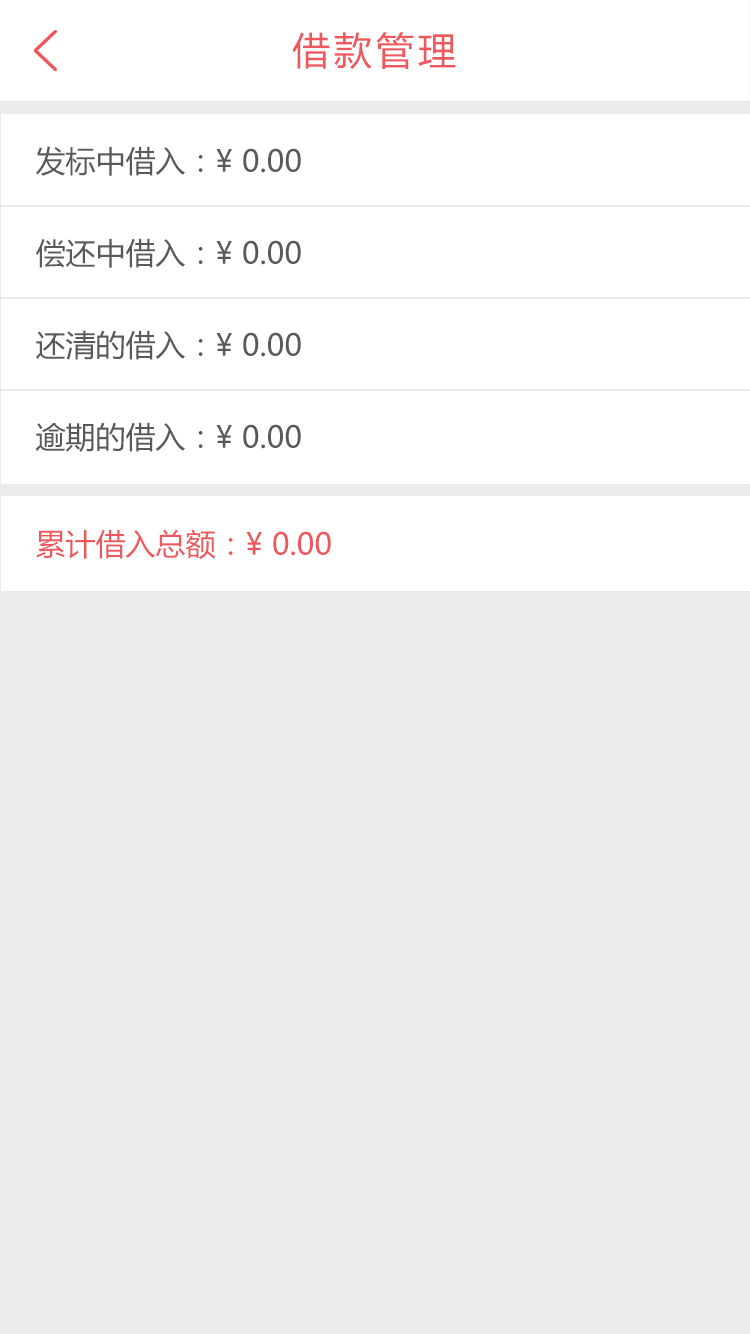
<style>
.page{position:relative;width:750px;height:1334px;background:#ebebeb}
.page>*{position:absolute;margin:0}
.t1{font:38px "MicrosoftYaHei";letter-spacing:0.1em;color:#ee575b}
.t2{font:30px "MicrosoftYaHei";color:#595959}
.t3{font:30px "MicrosoftYaHei";color:#ee575b}
</style>
<div class="page">
<p class="t1" style="left:292px;top:32px;width:164px;height:37px">借款管理</p>
<p class="t2" style="left:36px;top:146px;width:265px;height:30px">发标中借入：¥ 0.00</p>
<p class="t2" style="left:36px;top:238px;width:265px;height:30px">偿还中借入：¥ 0.00</p>
<p class="t2" style="left:36px;top:330px;width:265px;height:30px">还清的借入：¥ 0.00</p>
<p class="t2" style="left:35px;top:422px;width:266px;height:30px">逾期的借入：¥ 0.00</p>
<p class="t3" style="left:36px;top:529px;width:295px;height:30px">累计借入总额：¥ 0.00</p>
</div>
